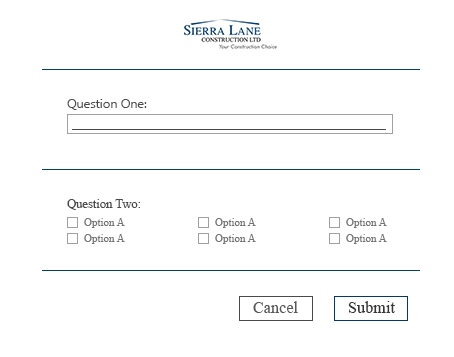
<style>
.page{position:relative;width:454px;height:357px;background:#ffffff}
.page>*{position:absolute;margin:0}
.t1{font:12.3px "MyanmarText";color:#4a4a4a}
.t2{font:12.3px "TimesNewRomanPSMT";color:#4a4a4a}
.t3{font:11px "TimesNewRomanPSMT";color:#727272}
.t4{font:16.7px "TimesNewRomanPSMT";color:#5a5959}
.t5{font:16.7px "TimesNewRomanPSMT";color:#363636}
</style>
<div class="page">
<p class="t1" style="left:67px;top:99px;width:80px;height:11px">Question One:</p>
<p class="t2" style="left:67px;top:199px;width:73px;height:11px">Question Two:</p>
<p class="t3" style="left:84px;top:218px;width:41px;height:10px">Option A</p>
<p class="t3" style="left:215px;top:218px;width:41px;height:10px">Option A</p>
<p class="t3" style="left:346px;top:218px;width:41px;height:10px">Option A</p>
<p class="t3" style="left:84px;top:234px;width:41px;height:10px">Option A</p>
<p class="t3" style="left:215px;top:234px;width:41px;height:10px">Option A</p>
<p class="t3" style="left:346px;top:234px;width:41px;height:10px">Option A</p>
<p class="t4" style="left:253px;top:301px;width:45px;height:12px">Cancel</p>
<p class="t5" style="left:348px;top:301px;width:47px;height:12px">Submit</p>
</div>
